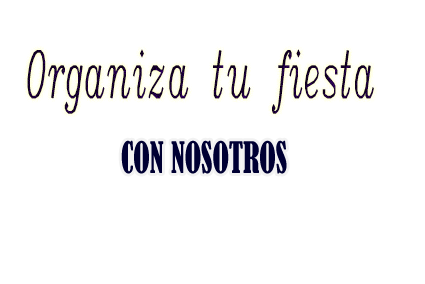
<style>
.page{position:relative;width:425px;height:284px;background:#ffffff}
.page>*{position:absolute;margin:0}
.t1{font:64.3px "Italic_IV25";color:#16002c;scale:0.46 1}
.t2{font:40.2px "BernardMT-Condensed";color:#000033;scale:0.75 1}
</style>
<div class="page">
<p class="t1" style="left:27px;top:49px;width:347px;height:65px">Organiza tu fiesta</p>
<p class="t2" style="left:121px;top:140px;width:166px;height:34px">CON NOSOTROS</p>
</div>
